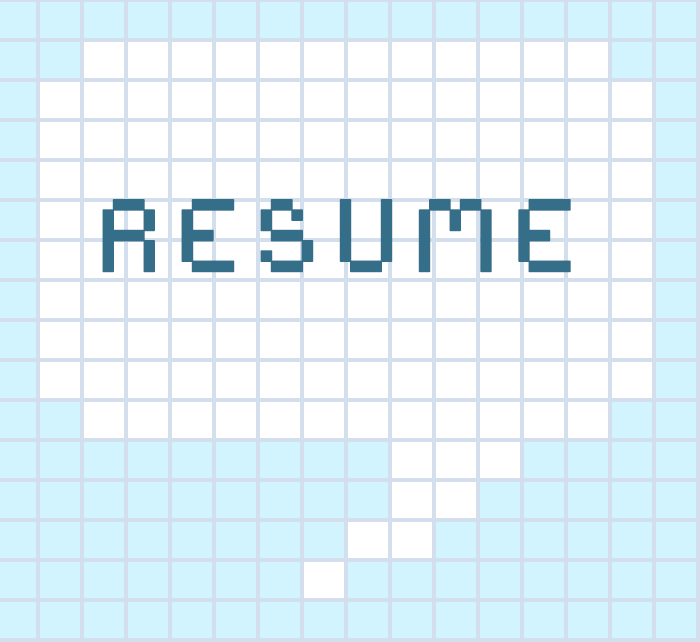
<style>
.page{position:relative;width:700px;height:642px;background:#ffffff}
.page>*{position:absolute;margin:0}
.t1{font:164px "BitsyButton-v2";letter-spacing:0.08em;color:#356e88;font-weight:bold}
</style>
<div class="page">
<p class="t1" style="left:102px;top:199px;width:469px;height:74px">RESUME</p>
</div>
